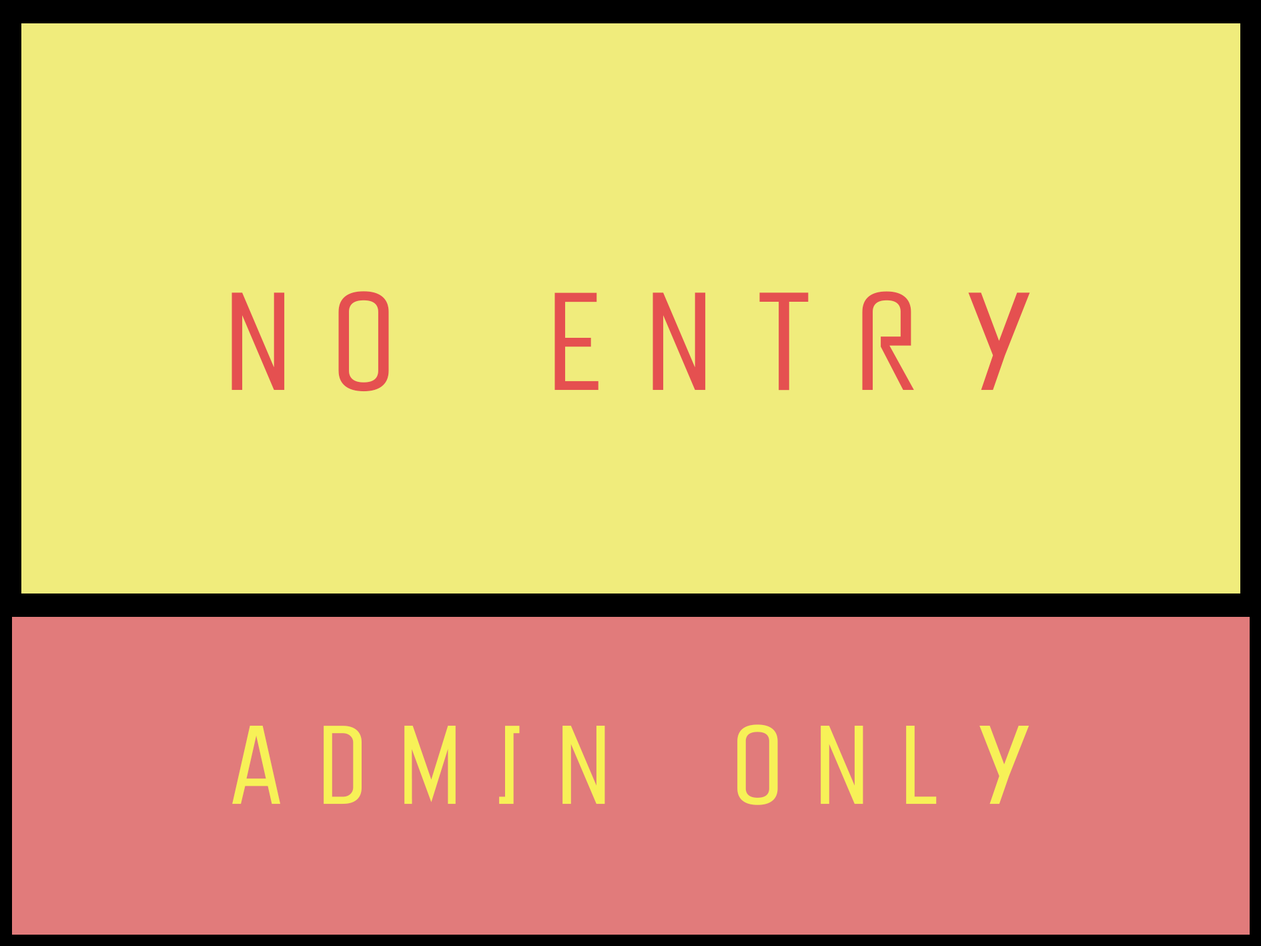
<style>
.page{position:relative;width:1261px;height:946px;background:#f0ec7c}
.page>*{position:absolute;margin:0}
.t1{font:139px "PeytonDisplay-ExtraLight";letter-spacing:0.28em;color:#e55050}
.t2{font:111.2px "PeytonDisplay-ExtraLight";letter-spacing:0.28em;color:#f7f157}
</style>
<div class="page">
<p class="t1" style="left:232px;top:291px;width:798px;height:101px">NO ENTRY</p>
<p class="t2" style="left:232px;top:724px;width:798px;height:81px">ADMIN ONLY</p>
</div>
